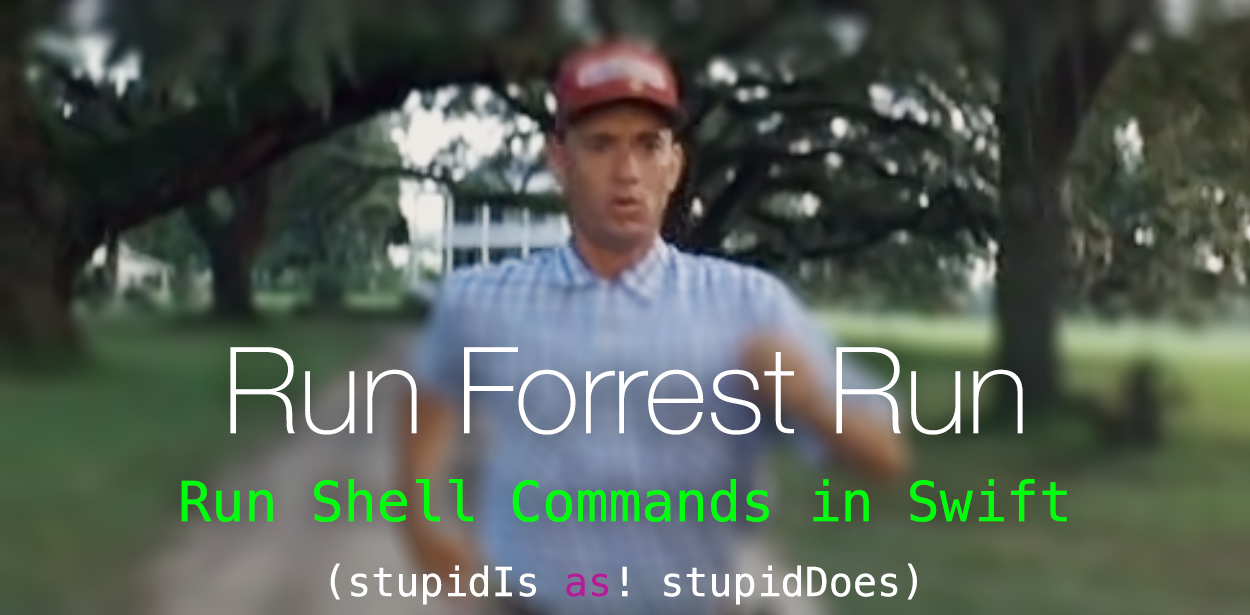
<style>
.page{position:relative;width:1250px;height:615px}
.page>*{position:absolute;margin:0}
.t1{font:120px "HelveticaNeue-Thin";color:#ffffff}
.t2{font:55px "Menlo-Regular";color:#00ff0c}
.t3{font:40px "Menlo-Regular";color:#ffffff}
.t4{font:40px "Menlo-Regular";color:#b41b97}
</style>
<div class="page">
<p class="t1" style="left:230px;top:347px;width:793px;height:88px">Run Forrest Run</p>
<p class="t2" style="left:181px;top:479px;width:886px;height:43px">Run Shell Commands in Swift</p>
<p class="t3" style="left:330px;top:563px;width:587px;height:42px">(stupidIs <span class="t4">as</span>! stupidDoes)</p>
</div>
